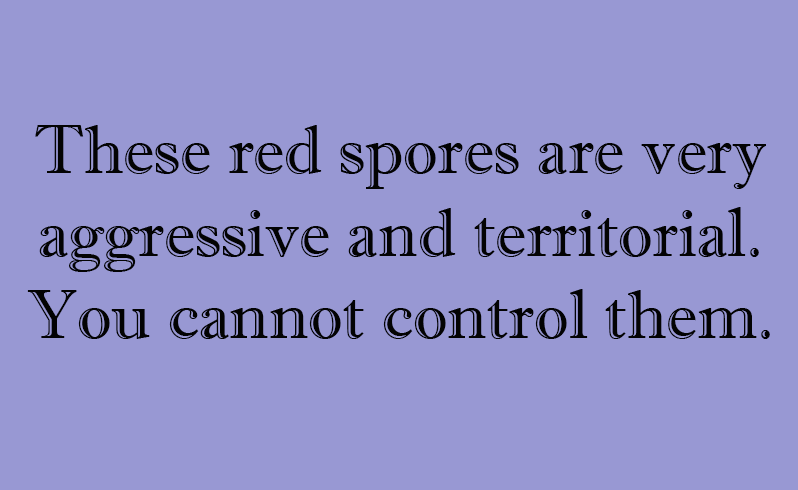
<style>
.page{position:relative;width:798px;height:490px;background:#9898d3}
.page>*{position:absolute;margin:0}
.t1{font:68.7px "ImprintMT-Shadow";color:#030303}
</style>
<div class="page">
<p class="t1" style="left:27px;top:125px;width:743px;height:214px;text-align:center">These red spores are very<br>aggressive and territorial.<br>You cannot control them.</p>
</div>
